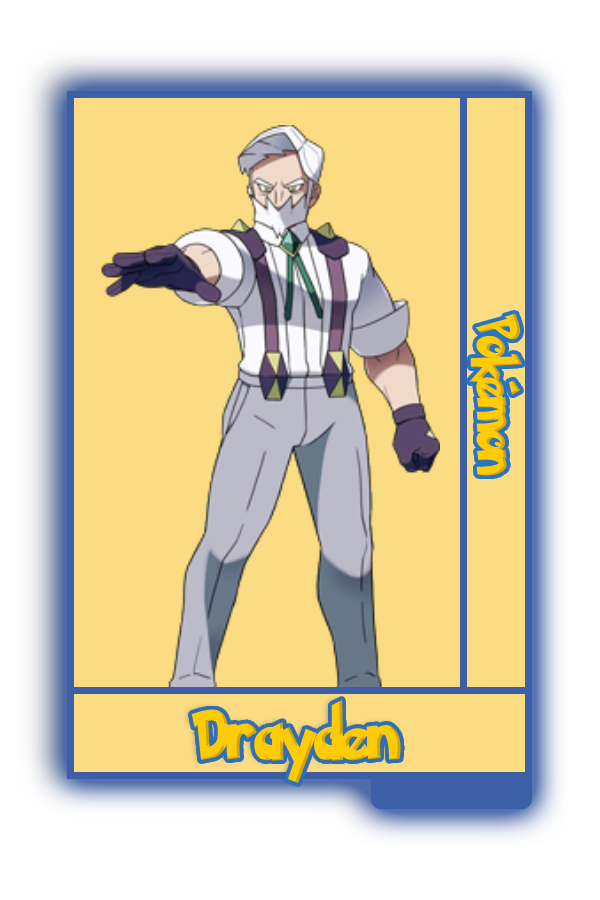
<style>
.page{position:relative;width:600px;height:900px;background:#fbdc83}
.page>*{position:absolute;margin:0}
.t1{font:48.8px "PokemonSolidNormal";color:#ffcb05;scale:0.8 1}
.t2{font:56.6px "PokemonSolidNormal";color:#ffcb05;scale:0.92 1}
</style>
<div class="page">
<p class="t1" style="left:469px;top:313px;width:54px;height:163px;rotate:90deg">Pokémon</p>
<p class="t2" style="left:191px;top:699px;width:210px;height:84px">Drayden</p>
</div>
